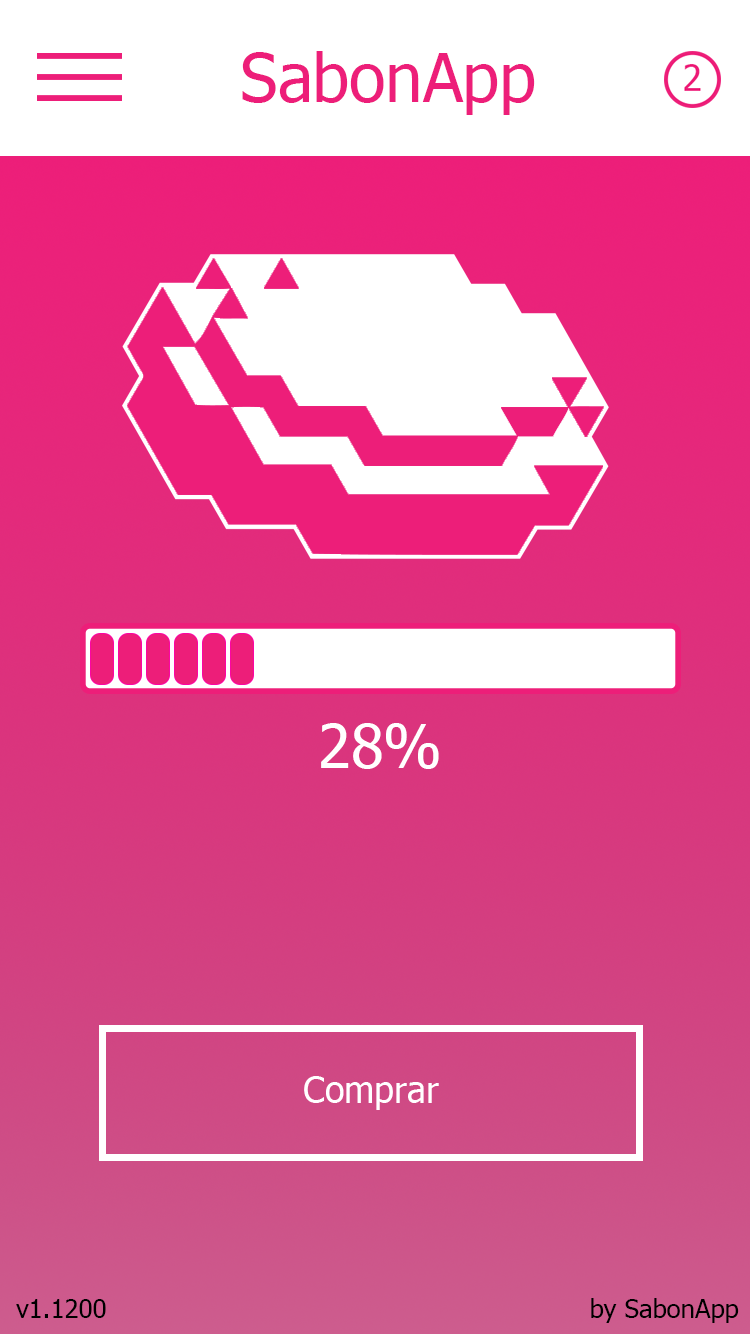
<style>
.page{position:relative;width:750px;height:1334px;background:#ffffff}
.page>*{position:absolute;margin:0}
.t1{font:66.6px "Tahoma";color:#ed1e79}
.t2{font:59.6px "Tahoma";color:#ffffff}
.t3{font:25.8px "Tahoma";color:#000000}
</style>
<div class="page">
<p class="t1" style="left:242px;top:51px;width:293px;height:64px">SabonApp</p>
<p class="t2" style="left:321px;top:723px;width:118px;height:46px">28%</p>
<p class="t3" style="left:16px;top:1298px;width:723px;height:25px">v1.1200                                                            by SabonApp</p>
</div>
